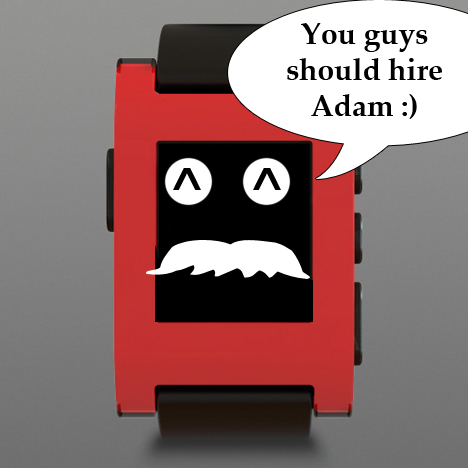
<style>
.page{position:relative;width:468px;height:468px}
.page>*{position:absolute;margin:0}
.t1{font:30px "PalatinoLinotype-Bold";color:#000000}
.t2{font:60px "PalatinoLinotype-Bold";color:#000000}
</style>
<div class="page">
<p class="t1" style="left:287px;top:23px;width:155px;height:96px;text-align:center">You guys should hire Adam :)</p>
<p class="t2" style="left:173px;top:168px;width:28px;height:22px">^</p>
<p class="t2" style="left:253px;top:168px;width:28px;height:22px">^</p>
</div>
